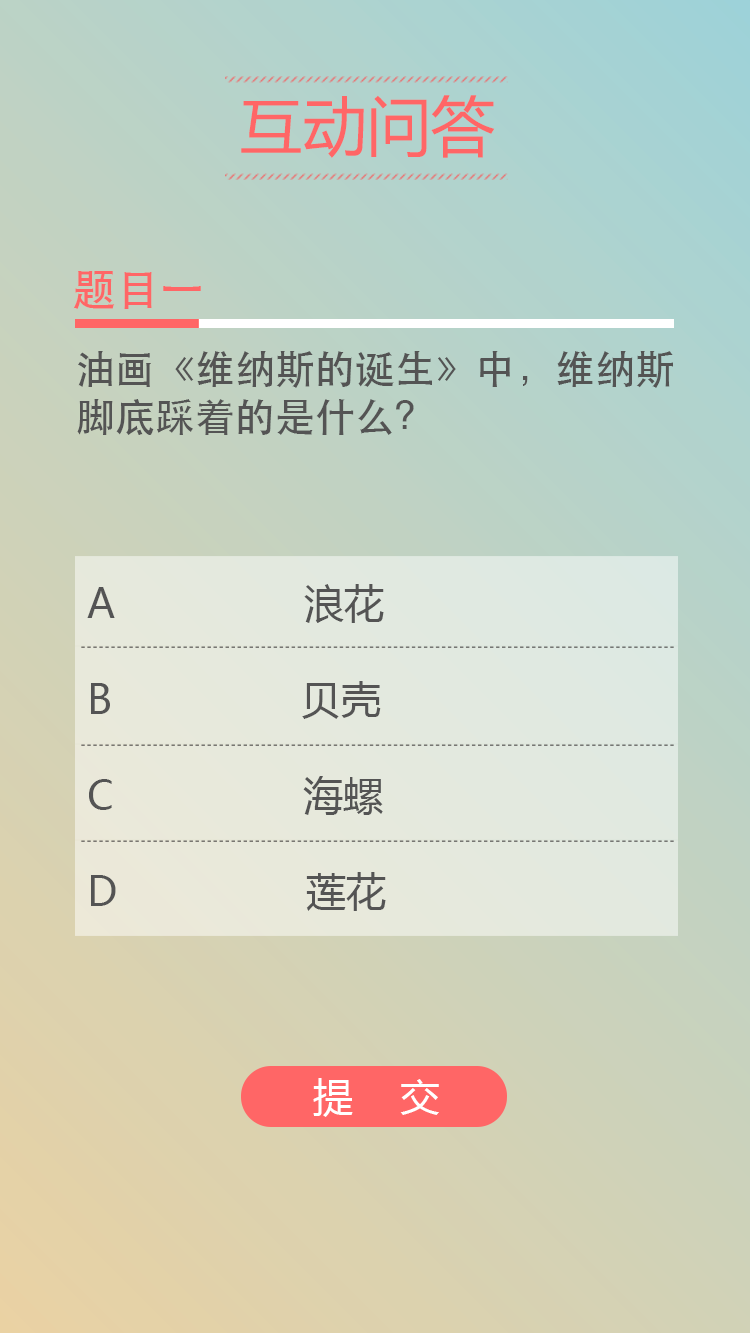
<style>
.page{position:relative;width:750px;height:1334px}
.page>*{position:absolute;margin:0}
.t1{font:64px "MicrosoftYaHei";color:#ff6666}
.t2{font:44px "STHeitiSC-Medium";color:#ff6666}
.t3{font:40px "MicrosoftYaHei";color:#545454}
.t4{font:40px "STHeitiSC-Medium";color:#545454}
.t5{font:40px "MicrosoftYaHei";color:#ffffff}
</style>
<div class="page">
<p class="t1" style="left:241px;top:95px;width:254px;height:63px">互动问答</p>
<p class="t2" style="left:73px;top:271px;width:128px;height:38px">题目一</p>
<p class="t3" style="left:77px;top:351px;width:596px;height:560px"><span class="t4">油画《维纳斯的诞生》中，维纳斯脚底踩着的是什么？<br><br><br><br></span> A                浪花<br><br> B                贝壳<br><br> C                海螺<br><br> D                莲花</p>
<p class="t5" style="left:313px;top:1078px;width:126px;height:39px">提    交</p>
</div>
